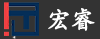
<style>
.page{position:relative;width:100px;height:39px;background:#333333}
.page>*{position:absolute;margin:0}
.t1{font:24px "KaiTi";color:#ffffff;font-weight:bold}
</style>
<div class="page">
<p class="t1" style="left:48px;top:8px;width:47px;height:23px">宏睿</p>
</div>
